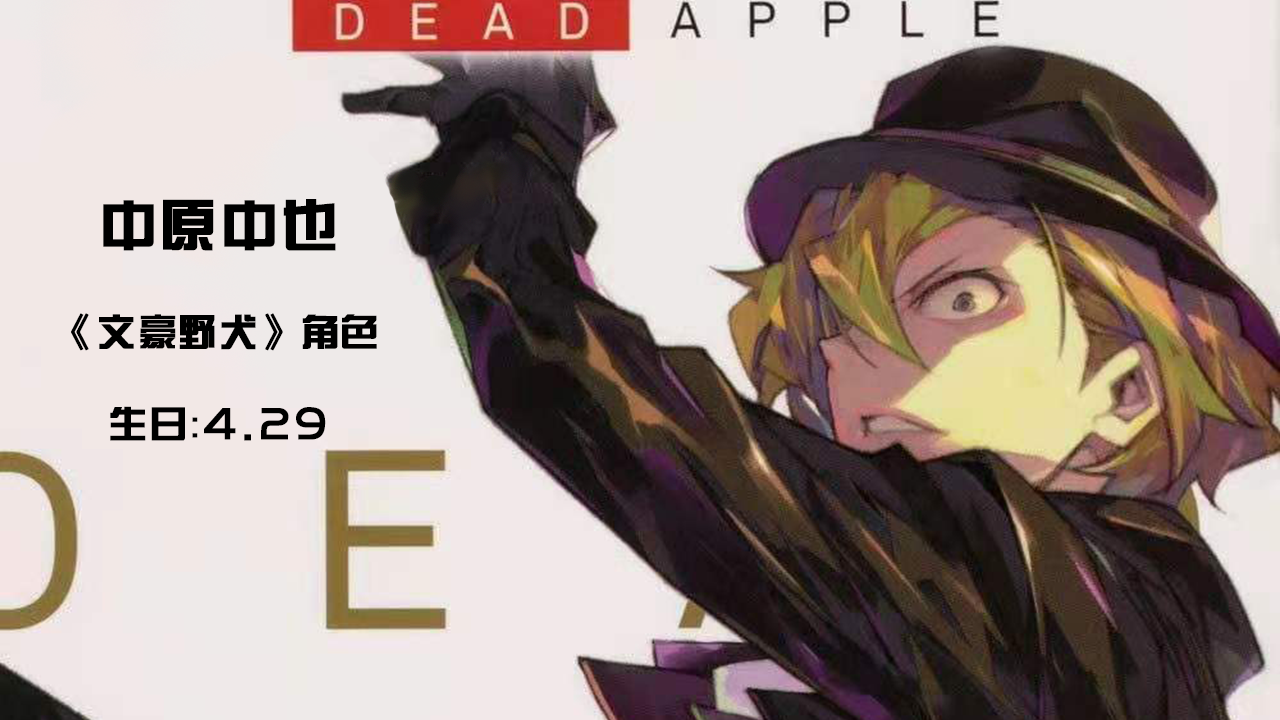
<style>
.page{position:relative;width:1280px;height:720px}
.page>*{position:absolute;margin:0}
.t1{font:37.7px "BDZYJT--GB1-0";letter-spacing:0.05em;color:#000000;font-weight:bold}
.t2{font:56.5px "BDZYJT--GB1-0";letter-spacing:0.05em;color:#000000;font-weight:bold}
.t3{font:47.1px "BDZYJT--GB1-0";letter-spacing:0.05em;color:#000000;font-weight:bold}
</style>
<div class="page">
<p class="t1" style="left:71px;top:199px;width:306px;height:242px;text-align:center"><span class="t2">中原中也<br></span>《文豪野犬》角色<br>生日：<span class="t3">4.29</span></p>
</div>
